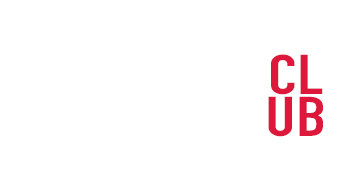
<style>
.page{position:relative;width:357px;height:188px;background:#ffffff}
.page>*{position:absolute;margin:0}
.t1{font:55px/42px "DINCondensed-Bold";color:#dc193a;scale:1.3 1}
</style>
<div class="page">
<p class="t1" style="left:268px;top:54px;width:55px;height:83px;text-align:center">CL<br>UB</p>
</div>
